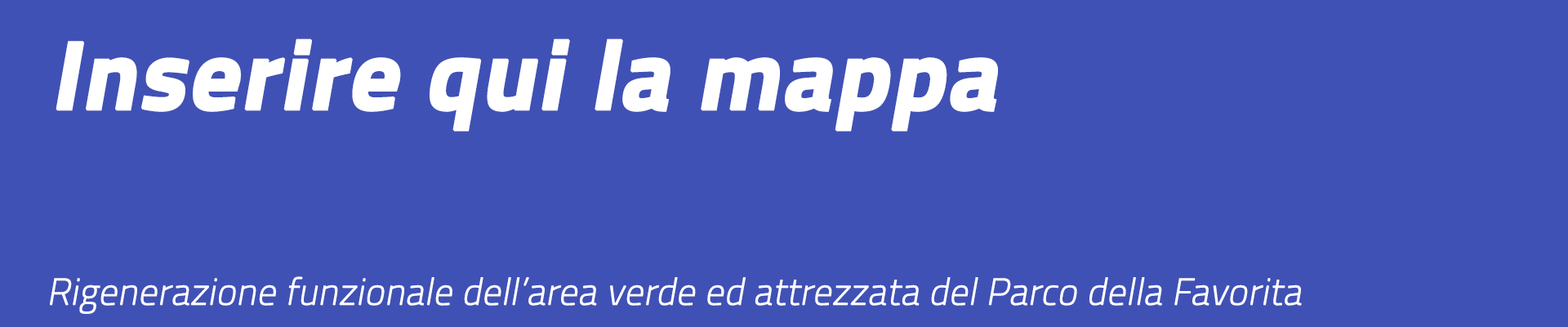
<style>
.page{position:relative;width:1568px;height:327px;background:#4051b5}
.page>*{position:absolute;margin:0}
.t1{font:98px "TitilliumWeb-Bold";color:#ffffff;font-weight:bold;font-style:italic}
.t2{font:36.8px "TitilliumWeb-ExtraLight";color:#ffffff;font-weight:bold;font-style:italic}
</style>
<div class="page">
<p class="t1" style="left:56px;top:38px;width:942px;height:93px">Inserire qui la mappa</p>
<p class="t2" style="left:50px;top:276px;width:1252px;height:38px">Rigenerazione funzionale dell’area verde ed attrezzata del Parco della Favorita</p>
</div>
